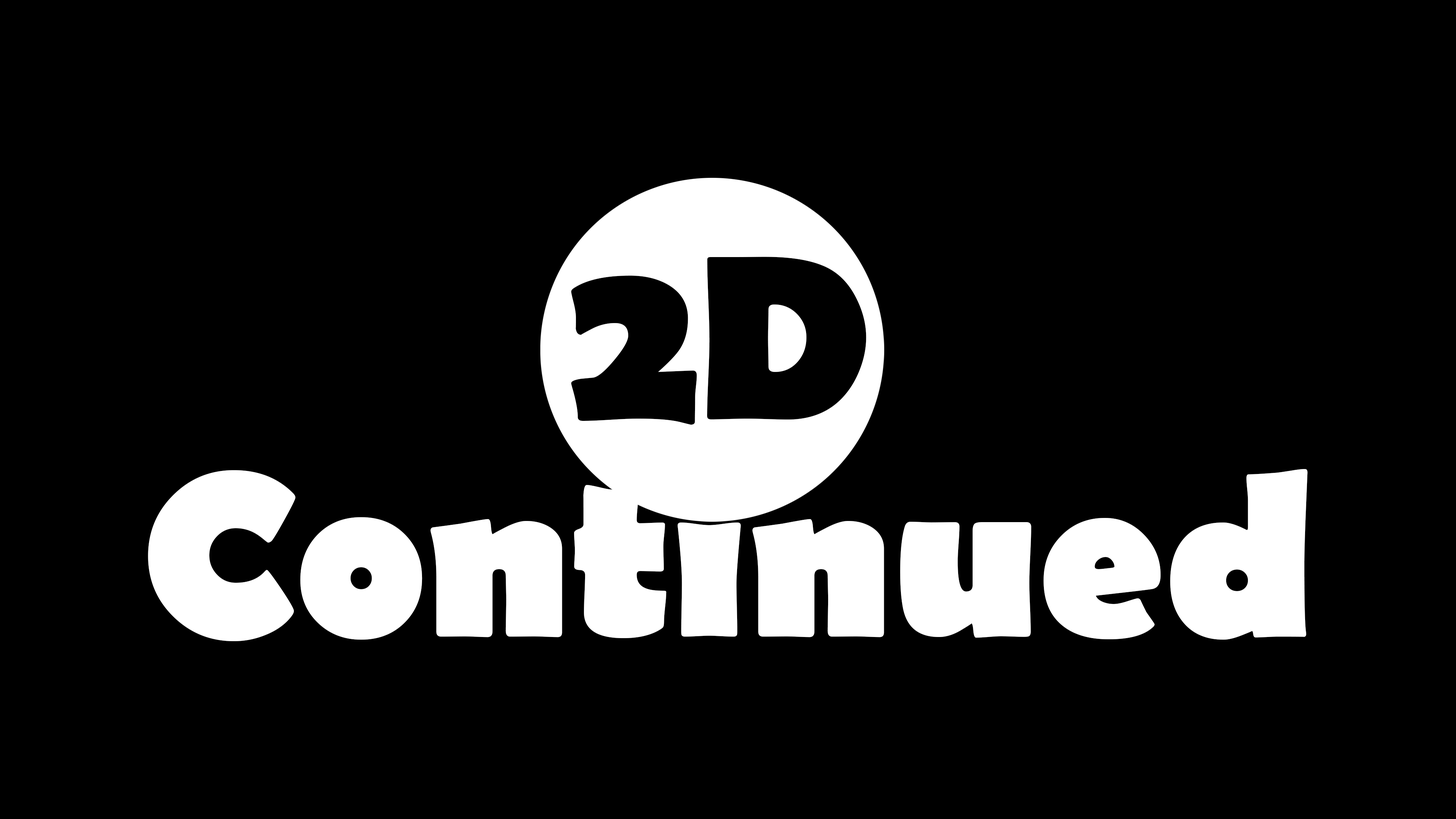
<style>
.page{position:relative;width:1456px;height:819px;background:#000000}
.page>*{position:absolute;margin:0}
.t1{font:236.9px "BerlinSansFB-Bold";color:#000000}
.t2{font:236.9px "BerlinSansFB-Bold";color:#ffffff}
</style>
<div class="page">
<p class="t1" style="left:571px;top:257px;width:295px;height:168px">2D</p>
<p class="t2" style="left:148px;top:469px;width:1160px;height:172px">Continued</p>
</div>
